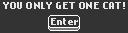
<style>
.page{position:relative;width:128px;height:33px;background:#333333}
.page>*{position:absolute;margin:0}
.t1{font:8px "NokiaCellphoneFC-Small";letter-spacing:0.025em;color:#e6e6e6}
</style>
<div class="page">
<p class="t1" style="left:3px;top:2px;width:122px;height:7px">YOU ONLY GET ONE CAT!</p>
<p class="t1" style="left:51px;top:18px;width:27px;height:7px">Enter</p>
</div>
